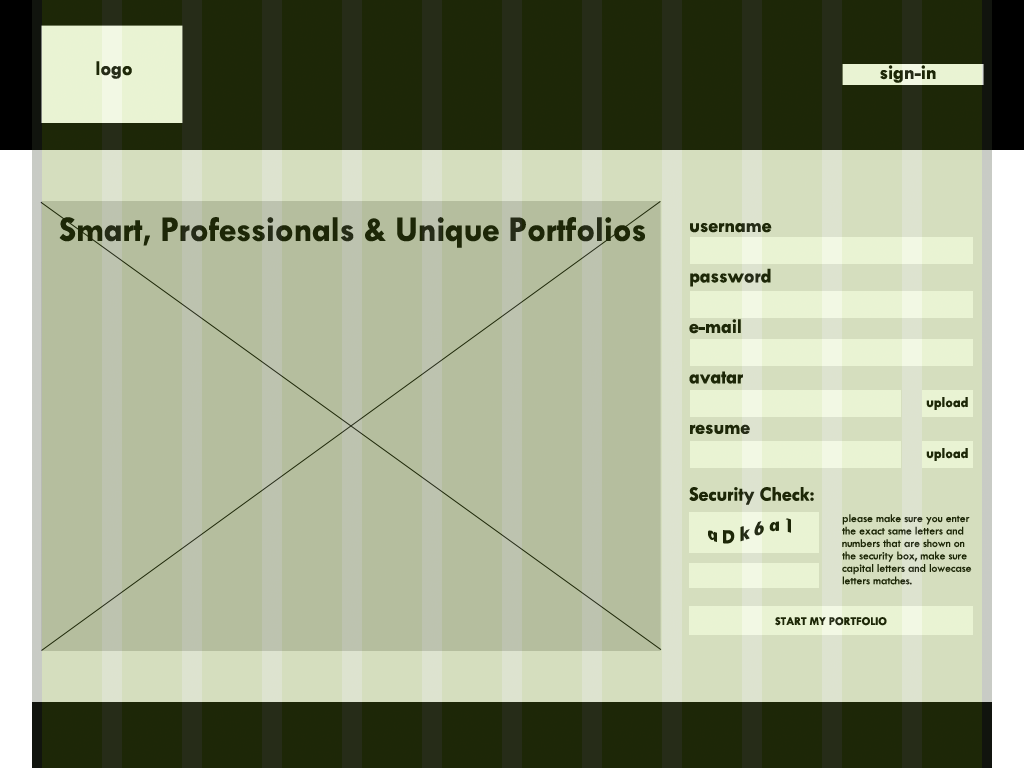
<style>
.page{position:relative;width:1024px;height:768px}
.page>*{position:absolute;margin:0}
.t1{font:20.8px "TwCenMT-Bold";letter-spacing:-0.015em;color:#262c18}
.t2{font:20.8px "TwCenMT-Bold";letter-spacing:-0.015em;color:#1d2707}
.t3{font:36.2px "TwCenMT-Bold";letter-spacing:-0.015em;color:#1d2707}
.t4{font:20.8px/50.5px "TwCenMT-Bold";letter-spacing:-0.015em;color:#1d2707}
.t5{font:20.8px/33.5px "TwCenMT-Bold";letter-spacing:-0.015em;color:#1d2707}
.t6{font:15px "TwCenMT-Bold";letter-spacing:-0.015em;color:#1d2707}
.t7{font:20.8px "TwCenMT-Bold";letter-spacing:0.2em;color:#1d2707}
.t8{font:12px/12.4px "TwCenMT-Regular";letter-spacing:-0.015em;color:#1d2707}
.t9{font:12px "TwCenMT-Bold";letter-spacing:-0.015em;color:#1d2707}
</style>
<div class="page">
<p class="t1" style="left:96px;top:61px;width:36px;height:18px">logo</p>
<p class="t2" style="left:880px;top:65px;width:56px;height:18px">sign-in</p>
<p class="t3" style="left:59px;top:217px;width:586px;height:31px">Smart, Professionals &amp; Unique Portfolios</p>
<p class="t4" style="left:689px;top:223px;width:125px;height:282px">username<br>password<br>e-mail<br>avatar<br>resume<br><span class="t5"><br>Security Check:</span></p>
<p class="t6" style="left:926px;top:397px;width:42px;height:13px">upload</p>
<p class="t6" style="left:926px;top:448px;width:42px;height:13px">upload</p>
<p class="t7" style="left:708px;top:518px;width:83px;height:26px">aDk6a1</p>
<p class="t8" style="left:842px;top:514px;width:130px;height:71px">please make sure you enter<br>the exact same letters and <br>numbers that are shown on<br>the security box, make sure<br>capital letters and lowecase<br>letters matches.</p>
<p class="t9" style="left:775px;top:617px;width:112px;height:9px">START MY PORTFOLIO</p>
</div>
